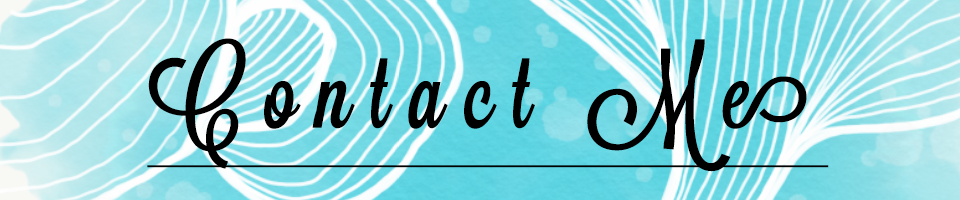
<style>
.page{position:relative;width:960px;height:200px}
.page>*{position:absolute;margin:0}
.t1{font:100px "Lavanderia-Sturdy";letter-spacing:0.2em;color:#000000;text-decoration:underline}
</style>
<div class="page">
<p class="t1" style="left:147px;top:38px;width:682px;height:134px">Contact Me</p>
</div>
